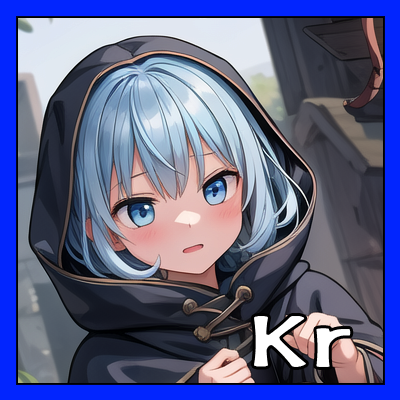
<style>
.page{position:relative;width:400px;height:400px}
.page>*{position:absolute;margin:0}
.t1{font:74.2px "YetR-HM";color:#ffffff;font-weight:bold;scale:1.33 1}
</style>
<div class="page">
<p class="t1" style="left:252px;top:314px;width:100px;height:55px">Kr</p>
</div>
